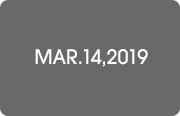
<style>
.page{position:relative;width:180px;height:116px;background:#696969}
.page>*{position:absolute;margin:0}
.t1{font:22px "TodayAG";color:#ffffff}
</style>
<div class="page">
<p class="t1" style="left:35px;top:49px;width:113px;height:18px">MAR.14,2019</p>
</div>
